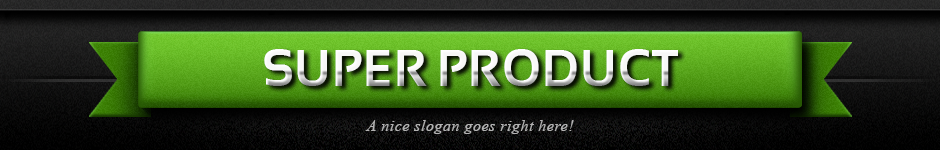
<style>
.page{position:relative;width:940px;height:150px}
.page>*{position:absolute;margin:0}
.t1{font:52px "Sansation-Bold";letter-spacing:0.025em;color:#ffffff;scale:0.94 1}
.t2{font:16.2px "TimesNewRomanPS-ItalicMT";letter-spacing:0.025em;color:#b3b3b3}
</style>
<div class="page">
<p class="t1" style="left:264px;top:49px;width:414px;height:37px">SUPER PRODUCT</p>
<p class="t2" style="left:365px;top:120px;width:209px;height:14px">A nice slogan goes right here!</p>
</div>
